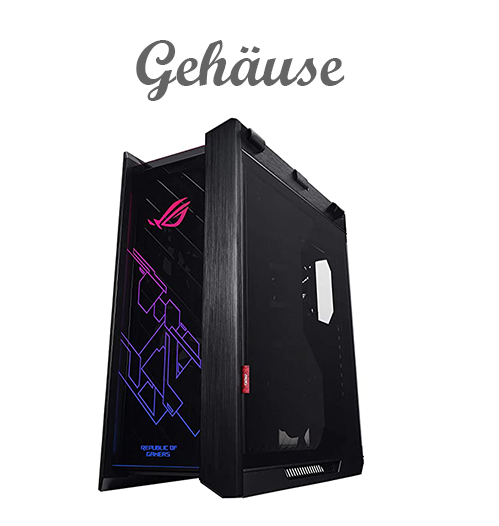
<style>
.page{position:relative;width:499px;height:526px;background:#ffffff}
.page>*{position:absolute;margin:0}
.t1{font:64px "ScriptMTBold";color:#656464}
</style>
<div class="page">
<p class="t1" style="left:136px;top:40px;width:209px;height:61px">Gehäuse</p>
</div>
